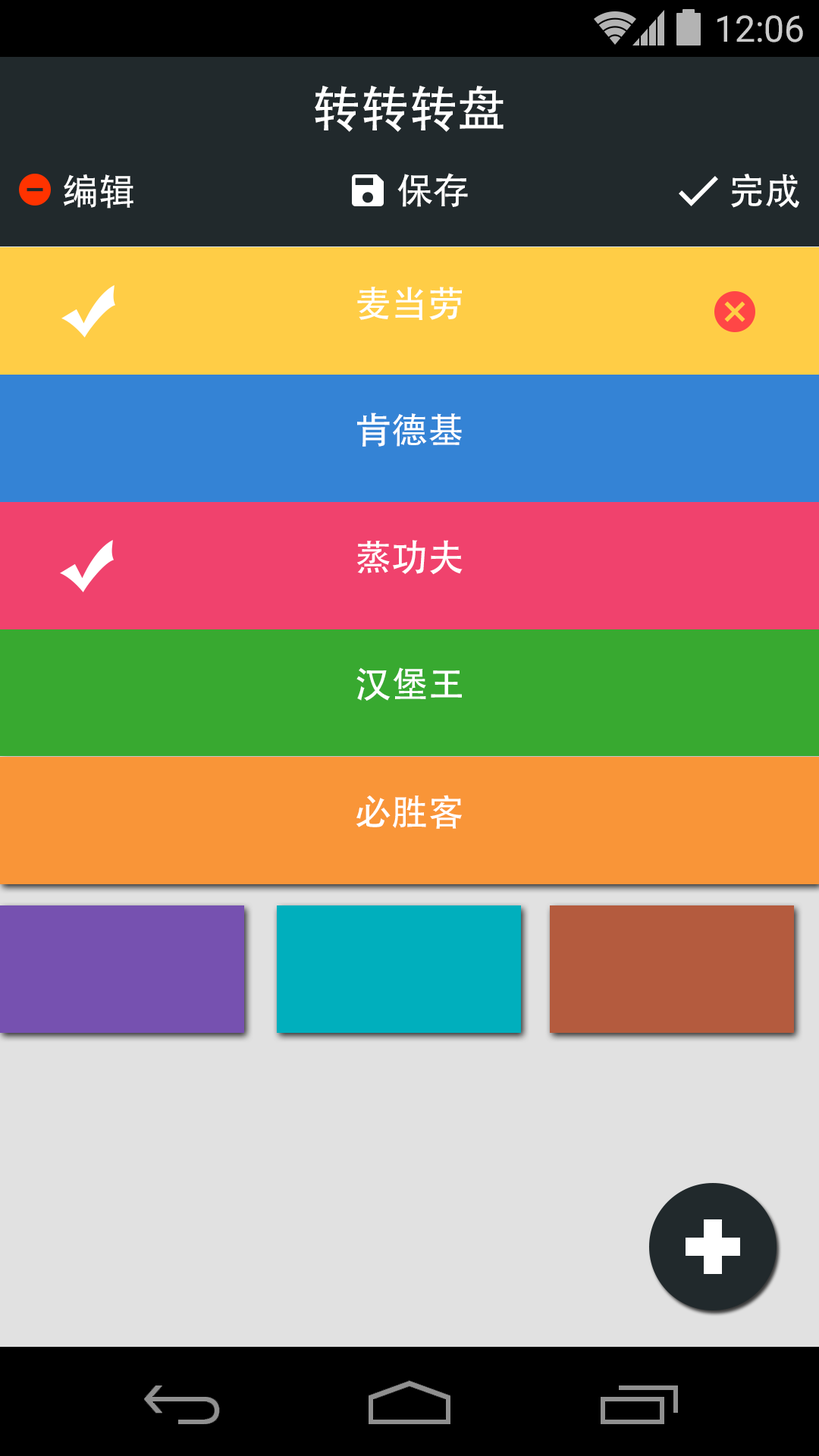
<style>
.page{position:relative;width:819px;height:1456px;background:#e1e1e1}
.page>*{position:absolute;margin:0}
.t1{font:36.4px "Roboto-Regular";color:#cbcbcb}
.t2{font:48.5px "AdobeHeitiStd-Regular";color:#ffffff}
.t3{font:36.4px "AdobeHeitiStd-Regular";color:#ffffff}
</style>
<div class="page">
<p class="t1" style="left:717px;top:15px;width:86px;height:27px">12:06</p>
<p class="t2" style="left:315px;top:86px;width:189px;height:46px">转转转盘</p>
<p class="t3" style="left:63px;top:174px;width:70px;height:35px">编辑</p>
<p class="t3" style="left:397px;top:173px;width:71px;height:34px">保存</p>
<p class="t3" style="left:731px;top:174px;width:68px;height:34px">完成</p>
<p class="t3" style="left:357px;top:287px;width:105px;height:33px">麦当劳</p>
<p class="t3" style="left:357px;top:413px;width:105px;height:34px">肯德基</p>
<p class="t3" style="left:357px;top:540px;width:106px;height:35px">蒸功夫</p>
<p class="t3" style="left:356px;top:667px;width:106px;height:34px">汉堡王</p>
<p class="t3" style="left:356px;top:795px;width:106px;height:34px">必胜客</p>
</div>
